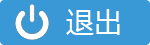
<style>
.page{position:relative;width:150px;height:45px;background:#3998d6}
.page>*{position:absolute;margin:0}
.t1{font:28px "MicrosoftYaHei";color:#ffffff}
</style>
<div class="page">
<p class="t1" style="left:66px;top:9px;width:54px;height:26px">退出</p>
</div>
